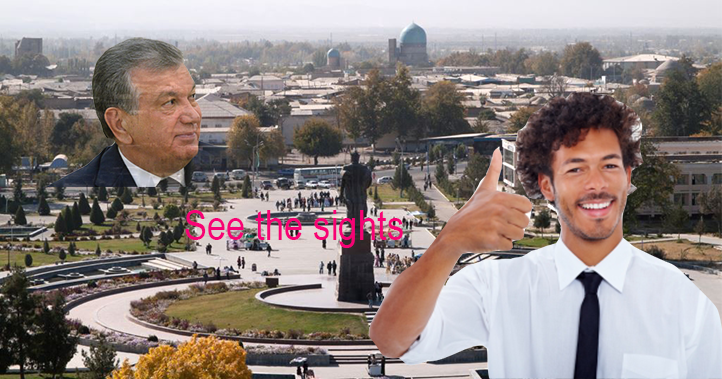
<style>
.page{position:relative;width:722px;height:379px}
.page>*{position:absolute;margin:0}
.t1{font:42.4px "ArialNarrow";color:#f70275}
</style>
<div class="page">
<p class="t1" style="left:185px;top:210px;width:218px;height:38px">See the sights</p>
</div>
